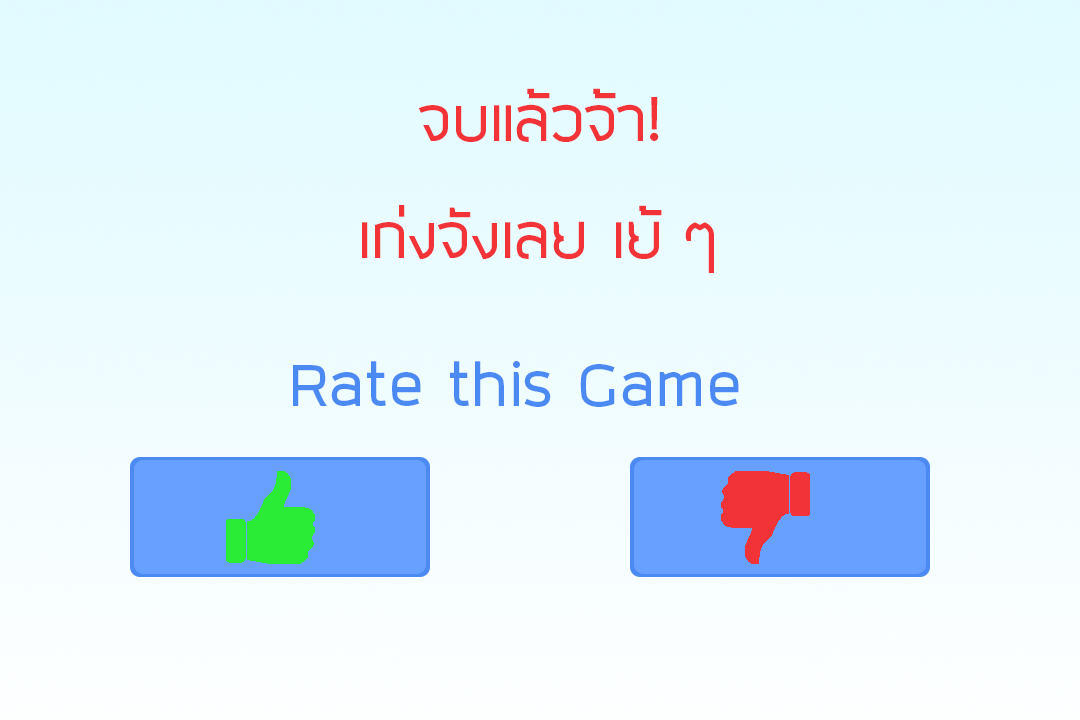
<style>
.page{position:relative;width:1080px;height:720px}
.page>*{position:absolute;margin:0}
.t1{font:72px "SuperspaceRegular";color:#f23439}
.t2{font:72px "SuperspaceRegular";color:#4b8af2}
</style>
<div class="page">
<p class="t1" style="left:418px;top:88px;width:241px;height:54px">จบแล้วจ้า!</p>
<p class="t1" style="left:362px;top:205px;width:352px;height:68px">เก่งจังเลย เย้ ๆ</p>
<p class="t2" style="left:293px;top:361px;width:446px;height:46px">Rate this Game</p>
</div>
